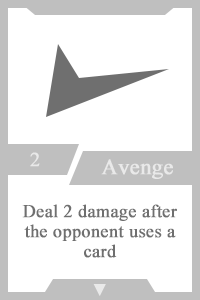
<style>
.page{position:relative;width:200px;height:300px;background:#ffffff}
.page>*{position:absolute;margin:0}
.t1{font:20px "TimesNewRomanPSMT";color:#e9e9e9;font-weight:bold}
.t2{font:22px "TimesNewRomanPSMT";color:#e9e9e9;font-weight:bold}
.t3{font:18px/20px "TimesNewRomanPSMT";color:#6f6f6f;font-weight:bold}
.t4{font:14px "AdobeHeitiStd-Regular";color:#e9e9e9;font-weight:bold}
</style>
<div class="page">
<p class="t1" style="left:30px;top:152px;width:10px;height:15px">2</p>
<p class="t2" style="left:101px;top:159px;width:72px;height:20px">Avenge</p>
<p class="t3" style="left:22px;top:204px;width:155px;height:54px;text-align:center">Deal 2 damage after the opponent uses a card</p>
<p class="t4" style="left:93px;top:284px;width:13px;height:12px">▼</p>
</div>
